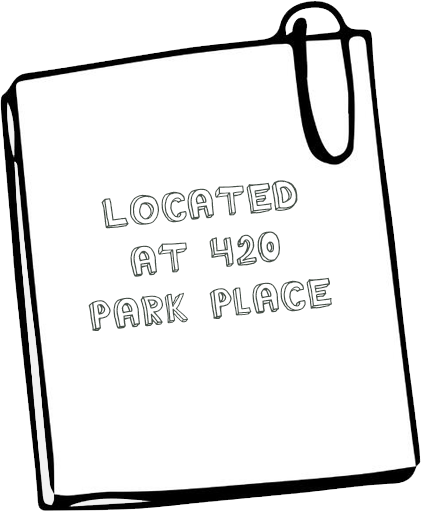
<style>
.page{position:relative;width:421px;height:511px;background:#ffffff}
.page>*{position:absolute;margin:0}
.t1{font:42px "TheRainmaker";color:#475149}
</style>
<div class="page">
<p class="t1" style="left:88px;top:180px;width:244px;height:151px;text-align:center;rotate:-6deg">Located <br>at 420 <br>Park Place</p>
</div>
